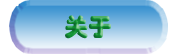
<style>
.page{position:relative;width:176px;height:54px}
.page>*{position:absolute;margin:0}
.t1{font:24px "STHupo"}
</style>
<div class="page">
<p class="t1" style="left:65px;top:15px;width:46px;height:24px">关于</p>
</div>
